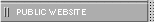
<style>
.page{position:relative;width:154px;height:22px;background:#adadad}
.page>*{position:absolute;margin:0}
.t1{font:8px "Small Fonts";letter-spacing:0.025em;color:#ffffff;text-transform:uppercase}
</style>
<div class="page">
<p class="t1" style="left:17px;top:9px;width:69px;height:6px">Public Website</p>
</div>
